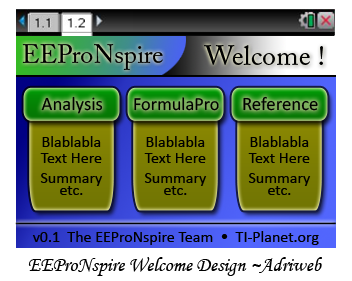
<style>
.page{position:relative;width:352px;height:281px;background:#ffffff}
.page>*{position:absolute;margin:0}
.t1{font:26px "ACaslonPro-Regular";color:#000000}
.t2{font:28px "ACaslonPro-Regular";color:#000000}
.t3{font:19px "Calibri";color:#000000}
.t4{font:18.5px "Calibri";color:#000000}
.t5{font:16px/4px "Calibri";color:#000000}
.t6{font:16px "Calibri";color:#000000}
.t7{font:20px "MonotypeCorsiva";color:#000000}
</style>
<div class="page">
<p class="t1" style="left:22px;top:44px;width:141px;height:26px">EEProNspire</p>
<p class="t2" style="left:204px;top:45px;width:119px;height:20px">Welcome !</p>
<p class="t3" style="left:41px;top:96px;width:62px;height:18px">Analysis</p>
<p class="t4" style="left:134px;top:97px;width:85px;height:14px">FormulaPro</p>
<p class="t3" style="left:243px;top:96px;width:75px;height:15px">Reference</p>
<p class="t5" style="left:40px;top:136px;width:63px;height:59px;text-align:center">Blablabla<br><br><br><br>Text Here<br><br><br><br><br>Summary<br><br><br>etc.</p>
<p class="t5" style="left:144px;top:136px;width:63px;height:59px;text-align:center">Blablabla<br><br><br><br>Text Here<br><br><br><br><br>Summary<br><br><br>etc.</p>
<p class="t5" style="left:248px;top:136px;width:63px;height:59px;text-align:center">Blablabla<br><br><br><br>Text Here<br><br><br><br><br>Summary<br><br><br>etc.</p>
<p class="t6" style="left:32px;top:231px;width:287px;height:14px">v0.1  The EEProNspire Team  •  TI-Planet.org</p>
<p class="t7" style="left:28px;top:257px;width:294px;height:19px">EEProNspire Welcome Design ~Adriweb</p>
</div>
